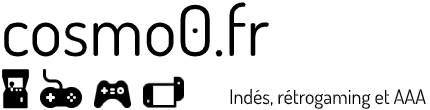
<style>
.page{position:relative;width:430px;height:110px;background:#ffffff}
.page>*{position:absolute;margin:0}
.t1{font:70px "Dosis-Regular";color:#000000}
.t2{font:20px "Dosis-Regular";color:#000000}
</style>
<div class="page">
<p class="t1" style="left:4px;top:2px;width:265px;height:55px">cosmo0.fr</p>
<p class="t2" style="left:230px;top:88px;width:196px;height:21px">Indés, rétrogaming et AAA</p>
</div>
